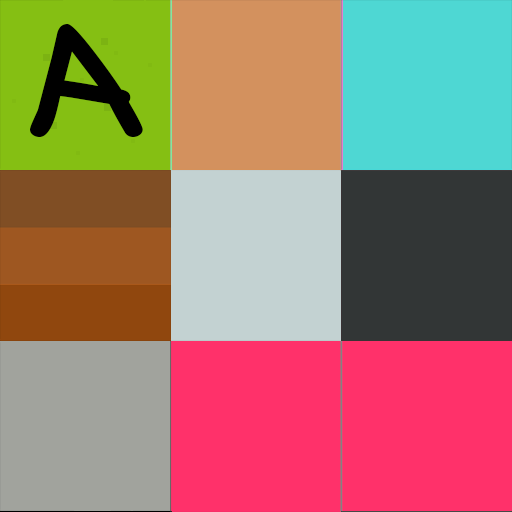
<style>
.page{position:relative;width:512px;height:512px;background:#ff316a}
.page>*{position:absolute;margin:0}
.t1{font:153.9px "ComicSansMS";color:#000000;scale:1.23 1}
</style>
<div class="page">
<p class="t1" style="left:30px;top:24px;width:113px;height:113px;rotate:180deg">A</p>
</div>
